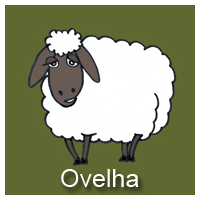
<style>
.page{position:relative;width:200px;height:200px;background:#5f6831}
.page>*{position:absolute;margin:0}
.t1{font:25px "ArialMT";color:#ffffff}
</style>
<div class="page">
<p class="t1" style="left:61px;top:169px;width:78px;height:18px">Ovelha</p>
</div>
